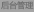
<style>
.page{position:relative;width:34px;height:12px;background:#a5a5a5}
.page>*{position:absolute;margin:0}
.t1{font:8px "MicrosoftYaHei";color:#707070}
</style>
<div class="page">
<p class="t1" style="left:1px;top:1px;width:33px;height:9px">后台管理</p>
</div>
